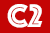
<style>
.page{position:relative;width:50px;height:33px;background:#c40505}
.page>*{position:absolute;margin:0}
.t1{font:33.6px "Phosphate-Inline";color:#ffffff}
</style>
<div class="page">
<p class="t1" style="left:7px;top:4px;width:36px;height:24px">C2</p>
</div>
